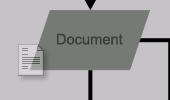
<style>
.page{position:relative;width:170px;height:100px;background:#c6c3c6}
.page>*{position:absolute;margin:0}
.t1{font:14.7px "ArialMT";color:#3b3c3b}
</style>
<div class="page">
<p class="t1" style="left:57px;top:33px;width:66px;height:12px">Document</p>
</div>
